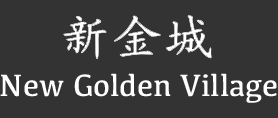
<style>
.page{position:relative;width:278px;height:118px;background:#333333}
.page>*{position:absolute;margin:0}
.t1{font:32px "Kefa-Regular";color:#ffffff}
</style>
<div class="page">
<p class="t1" style="left:0px;top:73px;width:277px;height:30px">New Golden Village</p>
</div>
